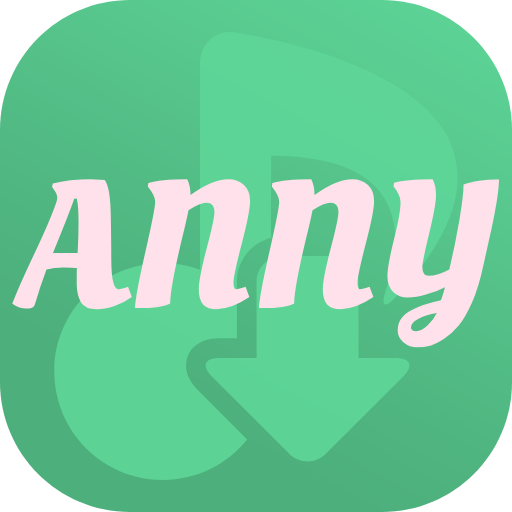
<style>
.page{position:relative;width:512px;height:512px}
.page>*{position:absolute;margin:0}
.t1{font:180px "OleoScript-Bold";color:#ffe1eb}
</style>
<div class="page">
<p class="t1" style="left:12px;top:179px;width:488px;height:169px">ANNY</p>
</div>
